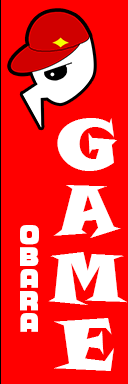
<style>
.page{position:relative;width:128px;height:384px;background:#ff0000}
.page>*{position:absolute;margin:0}
.t1{font:70.3px/66.7px "SnapITC-Regular";color:#ffffff}
.t2{font:23.2px/22px "VDL-LogoJrBlack-Black";color:#ffffff}
</style>
<div class="page">
<p class="t1" style="left:48px;top:118px;width:79px;height:253px;text-align:center">G<br>A<br>M<br>E</p>
<p class="t2" style="left:20px;top:225px;width:19px;height:107px;text-align:center">O<br>B<br>A<br>R<br>A</p>
</div>
